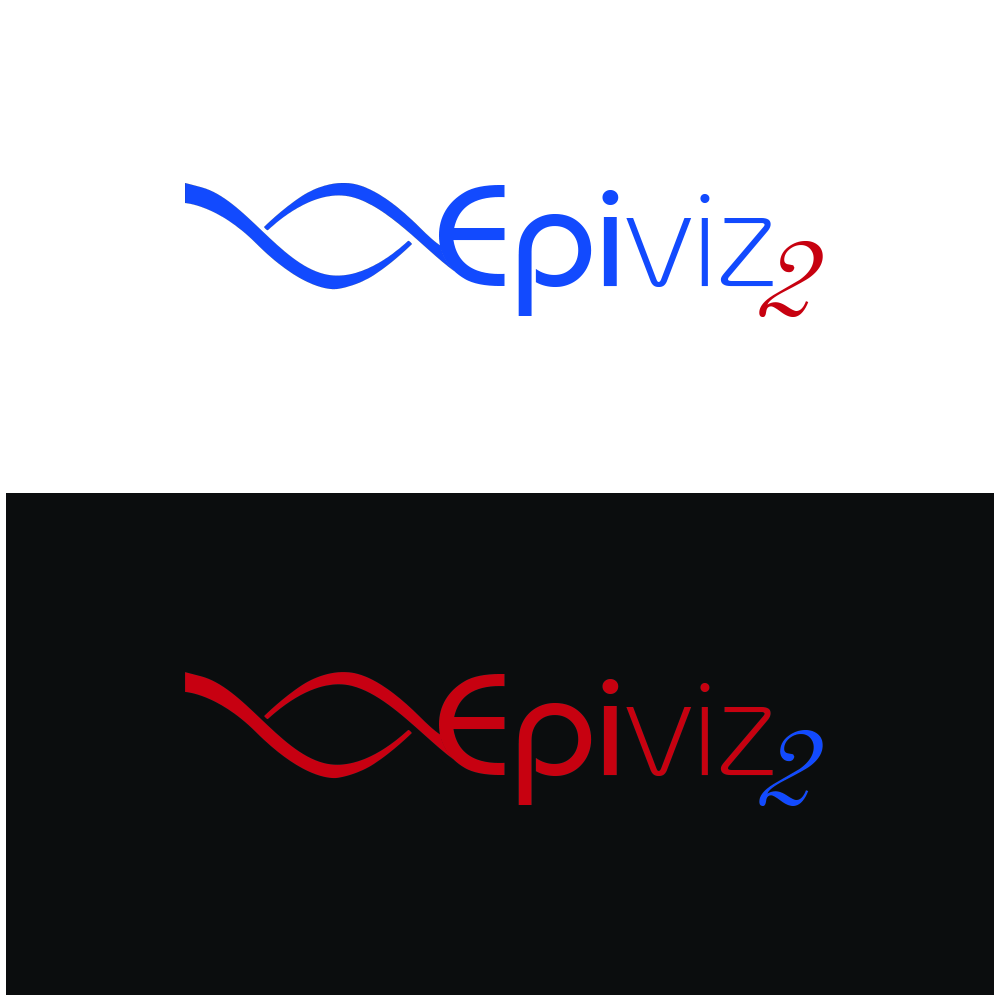
<style>
.page{position:relative;width:1000px;height:1000px;background:#ffffff}
.page>*{position:absolute;margin:0}
.t1{font:143.8px "BauhausITCbyBT-Medium";color:#124afe;scale:1.05 1}
.t2{font:143.8px "BauhausITCbyBT-Light";color:#124afe;scale:1.05 1}
.t3{font:166.7px "ARDECODE";color:#c70110}
.t4{font:143.8px "BauhausITCbyBT-Medium";color:#c70110;scale:1.05 1}
.t5{font:143.8px "BauhausITCbyBT-Light";color:#c70110;scale:1.05 1}
.t6{font:166.7px "ARDECODE";color:#124afe}
</style>
<div class="page">
<p class="t1" style="left:439px;top:185px;width:334px;height:131px">Epi<span class="t2">viz</span></p>
<p class="t3" style="left:759px;top:241px;width:64px;height:76px">2</p>
<p class="t4" style="left:439px;top:674px;width:334px;height:131px">Epi<span class="t5">viz</span></p>
<p class="t6" style="left:759px;top:730px;width:64px;height:76px">2</p>
</div>
